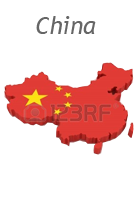
<style>
.page{position:relative;width:136px;height:200px;background:#ffffff}
.page>*{position:absolute;margin:0}
.t1{font:24px "TrebuchetMS-Italic";color:#666666}
</style>
<div class="page">
<p class="t1" style="left:36px;top:16px;width:60px;height:18px">China</p>
</div>
